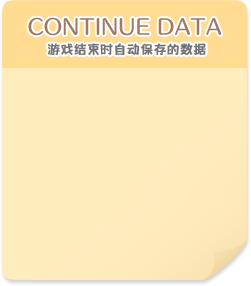
<style>
.page{position:relative;width:251px;height:286px;background:#ffedbe}
.page>*{position:absolute;margin:0}
.t1{font:12.9px "shetumodengxiaofangti";color:#747474;font-weight:bold}
</style>
<div class="page">
<p class="t1" style="left:47px;top:43px;width:159px;height:13px">游戏结束时自动保存的数据</p>
</div>
